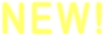
<style>
.page{position:relative;width:104px;height:36px;background:#ffff6f}
.page>*{position:absolute;margin:0}
.t1{font:41.8px "ArialNarrow";letter-spacing:0.1em;color:#ffff6f}
</style>
<div class="page">
<p class="t1" style="left:3px;top:3px;width:98px;height:30px">NEW!</p>
</div>
